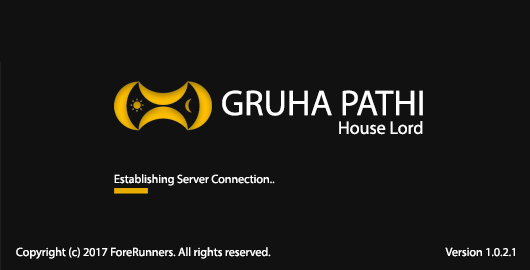
<style>
.page{position:relative;width:530px;height:270px;background:#111111}
.page>*{position:absolute;margin:0}
.t1{font:36px "MyriadPro-Regular";color:#ffffff}
.t2{font:18px "MyriadPro-Regular";color:#ffffff}
.t3{font:12px "MyriadPro-Regular";color:#ffffff}
</style>
<div class="page">
<p class="t1" style="left:222px;top:90px;width:201px;height:26px">GRUHA PATHI</p>
<p class="t2" style="left:339px;top:121px;width:84px;height:14px">House Lord</p>
<p class="t3" style="left:114px;top:174px;width:161px;height:12px">Establishing Server Connection..</p>
<p class="t3" style="left:16px;top:247px;width:255px;height:12px">Copyright (c) 2017 ForeRunners. All rights reserved.</p>
<p class="t3" style="left:445px;top:247px;width:70px;height:10px">Version 1.0.2.1</p>
</div>
